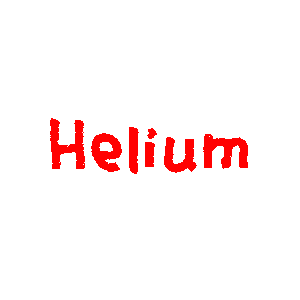
<style>
.page{position:relative;width:300px;height:300px;background:#ffffff}
.page>*{position:absolute;margin:0}
.t1{font:75px "AntivirusViruses";letter-spacing:-0.02em;color:#ff0202}
</style>
<div class="page">
<p class="t1" style="left:50px;top:118px;width:198px;height:56px">Helium</p>
</div>
